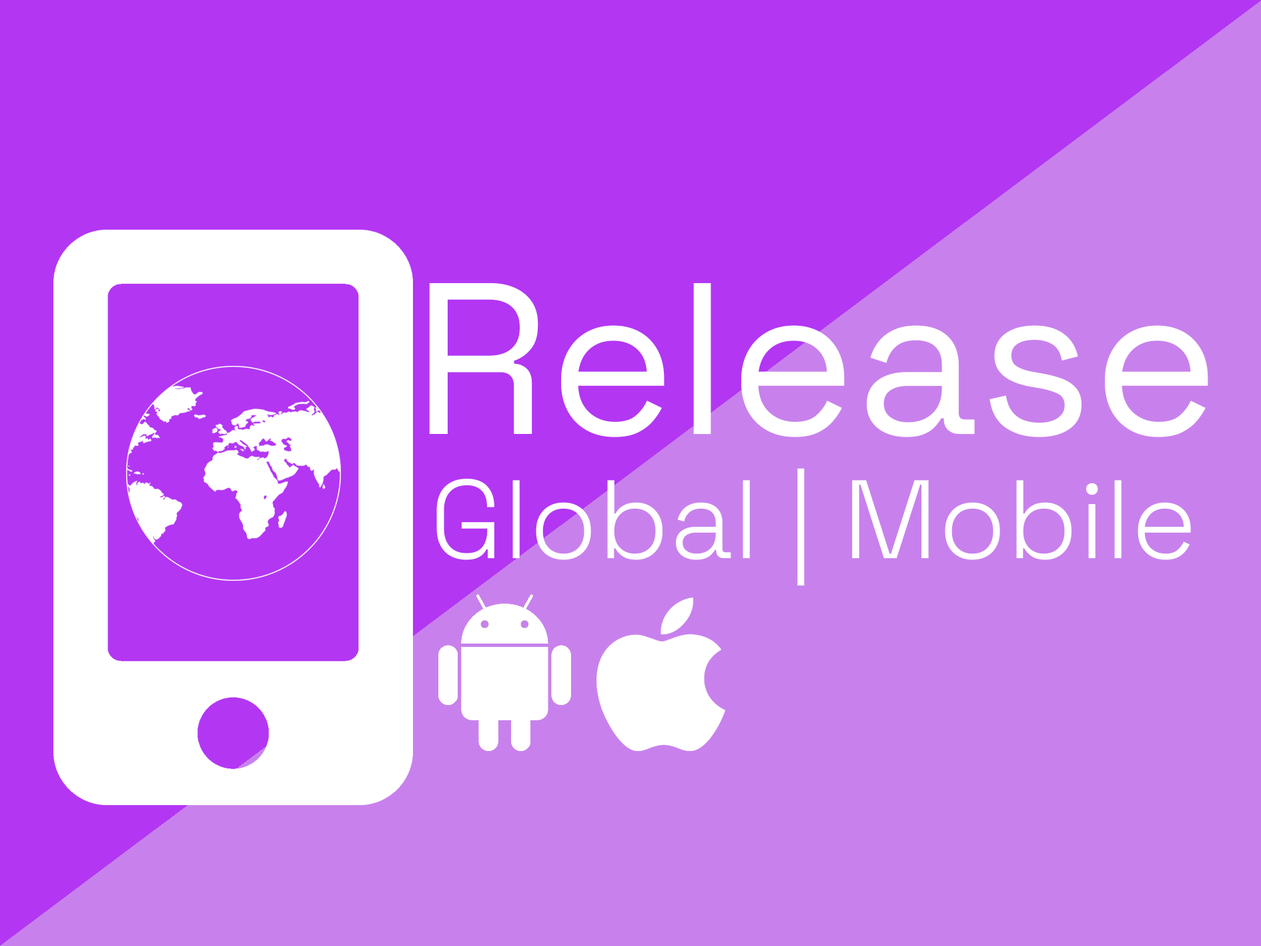
<style>
.page{position:relative;width:1261px;height:946px;background:#c881ec}
.page>*{position:absolute;margin:0}
.t1{font:215.3px "SpaceGrotesk-Regular";color:#ffffff}
.t2{font:111.1px "SpaceGrotesk-Light";color:#ffffff}
</style>
<div class="page">
<p class="t1" style="left:429px;top:283px;width:779px;height:154px">Release</p>
<p class="t2" style="left:436px;top:468px;width:755px;height:117px">Global | Mobile</p>
</div>
